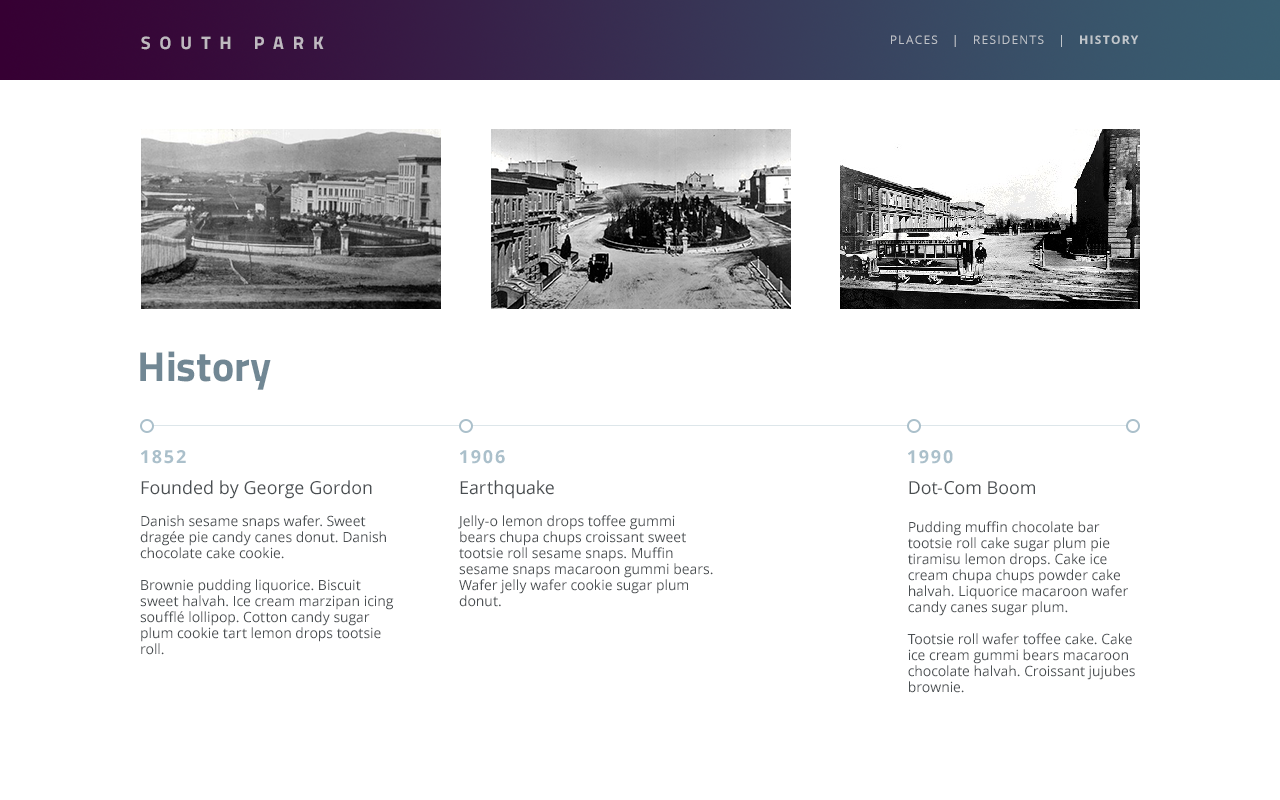
<style>
.page{position:relative;width:1280px;height:800px;background:#ffffff}
.page>*{position:absolute;margin:0}
.t1{font:18px "Titillium-Bold";letter-spacing:0.5em;color:#bfb8c0;text-transform:uppercase}
.t2{font:12px "OpenSans";letter-spacing:0.1em;color:#c0c5cb;text-transform:uppercase}
.t3{font:12px "OpenSans-Bold";letter-spacing:0.1em;color:#c0c5cb;text-transform:uppercase}
.t4{font:42px "Titillium-Bold";color:#718794}
.t5{font:18px "OpenSans-Bold";letter-spacing:0.1em;color:#abc0cb;text-transform:uppercase}
.t6{font:14px/16px "OpenSans";color:#494e51}
.t7{font:18px/22px "OpenSans";color:#494e51}
</style>
<div class="page">
<p class="t1" style="left:141px;top:36px;width:183px;height:14px">south park</p>
<p class="t2" style="left:891px;top:35px;width:248px;height:12px">places   |   residents   |   <span class="t3">history</span></p>
<p class="t4" style="left:140px;top:351px;width:131px;height:39px">History</p>
<p class="t5" style="left:141px;top:450px;width:45px;height:14px">1852</p>
<p class="t5" style="left:460px;top:450px;width:45px;height:14px">1906</p>
<p class="t5" style="left:908px;top:450px;width:45px;height:14px">1990</p>
<p class="t6" style="left:140px;top:480px;width:254px;height:175px"><span class="t7">Founded by George Gordon<br></span><br>Danish sesame snaps wafer. Sweet dragée pie candy canes donut. Danish chocolate cake cookie.<br><br>Brownie pudding liquorice. Biscuit sweet halvah. Ice cream marzipan icing soufflé lollipop. Cotton candy sugar plum cookie tart lemon drops tootsie roll.</p>
<p class="t6" style="left:458px;top:480px;width:255px;height:127px"><span class="t7">Earthquake<br></span><br>Jelly-o lemon drops toffee gummi bears chupa chups croissant sweet tootsie roll sesame snaps. Muffin sesame snaps macaroon gummi bears. Wafer jelly wafer cookie sugar plum donut.</p>
<p class="t6" style="left:907px;top:481px;width:228px;height:212px"><span class="t7">Dot-Com Boom<br><br></span>Pudding muffin chocolate bar tootsie roll cake sugar plum pie tiramisu lemon drops. Cake ice cream chupa chups powder cake halvah. Liquorice macaroon wafer candy canes sugar plum.<br><br>Tootsie roll wafer toffee cake. Cake ice cream gummi bears macaroon chocolate halvah. Croissant jujubes brownie.</p>
</div>
